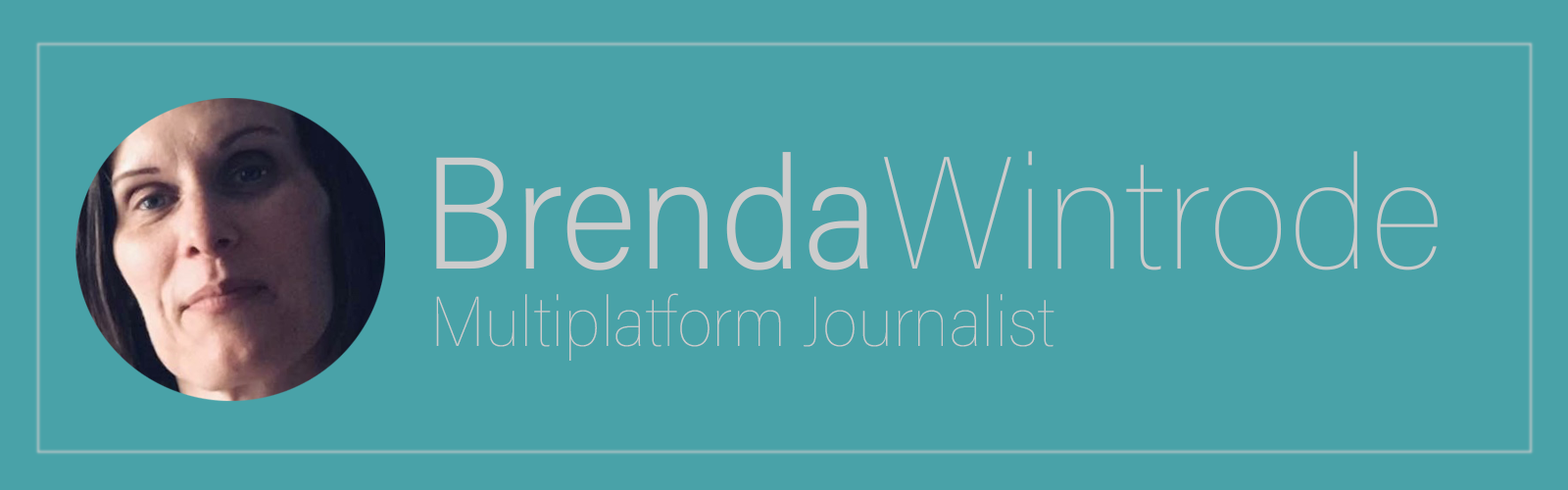
<style>
.page{position:relative;width:1568px;height:490px;background:#49a2a8}
.page>*{position:absolute;margin:0}
.t1{font:159.8px "AcuminConcept-SemiCondensedThin";color:#cccccc}
.t2{font:159.8px "AcuminConcept-SemiCondensedExtraLight";color:#cccccc}
.t3{font:70.6px "AcuminConcept-SemiCondensedThin";color:#cccccc}
</style>
<div class="page">
<p class="t1" style="left:436px;top:151px;width:1002px;height:119px"><span class="t2">Brenda</span>Wintrode</p>
<p class="t3" style="left:436px;top:293px;width:618px;height:68px">Multiplatform Journalist</p>
</div>
